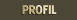
<style>
.page{position:relative;width:77px;height:20px;background:#4b4635}
.page>*{position:absolute;margin:0}
.t1{font:14px "Delicious-Heavy";letter-spacing:-0.02em}
</style>
<div class="page">
<p class="t1" style="left:22px;top:5px;width:35px;height:10px">PROFIL</p>
</div>
